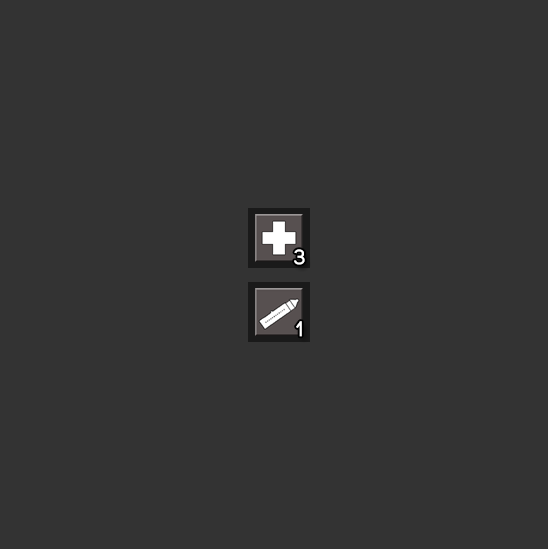
<style>
.page{position:relative;width:548px;height:549px;background:#333333}
.page>*{position:absolute;margin:0}
.t1{font:21.3px "Code-Bold";color:#ffffff}
</style>
<div class="page">
<p class="t1" style="left:294px;top:249px;width:11px;height:16px">3</p>
<p class="t1" style="left:296px;top:321px;width:6px;height:16px">1</p>
</div>
